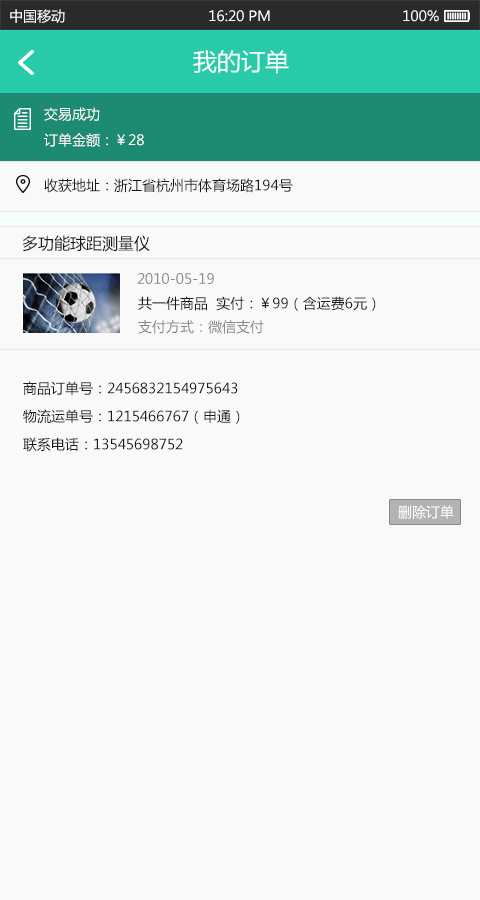
<style>
.page{position:relative;width:480px;height:900px;background:#f9f9f9}
.page>*{position:absolute;margin:0}
.t1{font:14px "MicrosoftYaHei";color:#ffffff}
.t2{font:24px "MicrosoftYaHei";color:#f4fffd}
.t3{font:14px "MicrosoftYaHei";color:#191919}
.t4{font:16px "MicrosoftYaHei";color:#191919}
.t5{font:14px "MicrosoftYaHei";color:#898989}
.t6{font:14px/28px "MicrosoftYaHei";color:#191919}
</style>
<div class="page">
<p class="t1" style="left:10px;top:9px;width:55px;height:14px">中国移动</p>
<p class="t1" style="left:209px;top:10px;width:61px;height:12px">16:20 PM</p>
<p class="t1" style="left:403px;top:10px;width:36px;height:12px">100%</p>
<p class="t2" style="left:193px;top:50px;width:96px;height:24px">我的订单</p>
<p class="t1" style="left:44px;top:107px;width:56px;height:14px">交易成功</p>
<p class="t1" style="left:44px;top:133px;width:100px;height:14px">订单金额：￥28</p>
<p class="t3" style="left:44px;top:178px;width:249px;height:15px">收获地址：浙江省杭州市体育场路194号</p>
<p class="t4" style="left:22px;top:235px;width:128px;height:17px">多功能球距测量仪</p>
<p class="t5" style="left:137px;top:273px;width:77px;height:11px">2010-05-19</p>
<p class="t3" style="left:138px;top:296px;width:238px;height:15px">共一件商品  实付：￥99（含运费6元）</p>
<p class="t5" style="left:138px;top:320px;width:126px;height:14px">支付方式：微信支付</p>
<p class="t6" style="left:23px;top:381px;width:217px;height:71px">商品订单号：2456832154975643<br>物流运单号：1215466767（申通）<br>联系电话：13545698752</p>
<p class="t1" style="left:398px;top:505px;width:56px;height:14px">删除订单</p>
</div>
